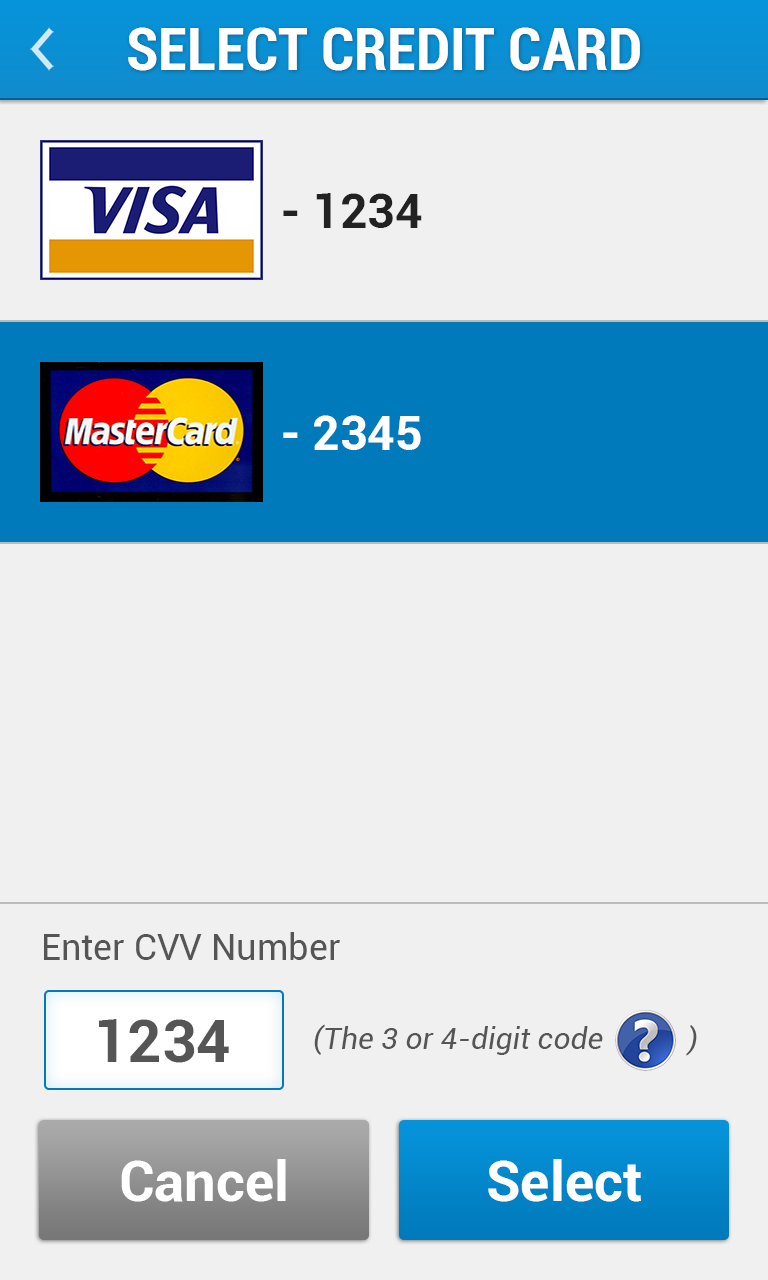
<style>
.page{position:relative;width:768px;height:1280px;background:#f0f0f0}
.page>*{position:absolute;margin:0}
.t1{font:60px "Roboto-BoldCondensed";color:#ffffff}
.t2{font:48px "Roboto-Bold";color:#222222}
.t3{font:48px "Roboto-Bold";color:#fefefe}
.t4{font:36px "Roboto-Regular";color:#555555}
.t5{font:60px "Roboto-Bold";color:#555555}
.t6{font:30px "Roboto-Italic";color:#555555}
.t7{font:56px "Roboto-Bold";color:#ffffff}
</style>
<div class="page">
<p class="t1" style="left:128px;top:27px;width:512px;height:44px">SELECT CREDIT CARD</p>
<p class="t2" style="left:283px;top:193px;width:139px;height:35px">- 1234</p>
<p class="t3" style="left:283px;top:415px;width:138px;height:35px">- 2345</p>
<p class="t4" style="left:44px;top:932px;width:296px;height:28px">Enter CVV Number</p>
<p class="t5" style="left:99px;top:1019px;width:130px;height:44px">1234</p>
<p class="t6" style="left:314px;top:1024px;width:383px;height:32px">(The 3 or 4-digit code    )</p>
<p class="t7" style="left:121px;top:1159px;width:165px;height:43px">Cancel</p>
<p class="t7" style="left:488px;top:1159px;width:153px;height:43px">Select</p>
</div>
